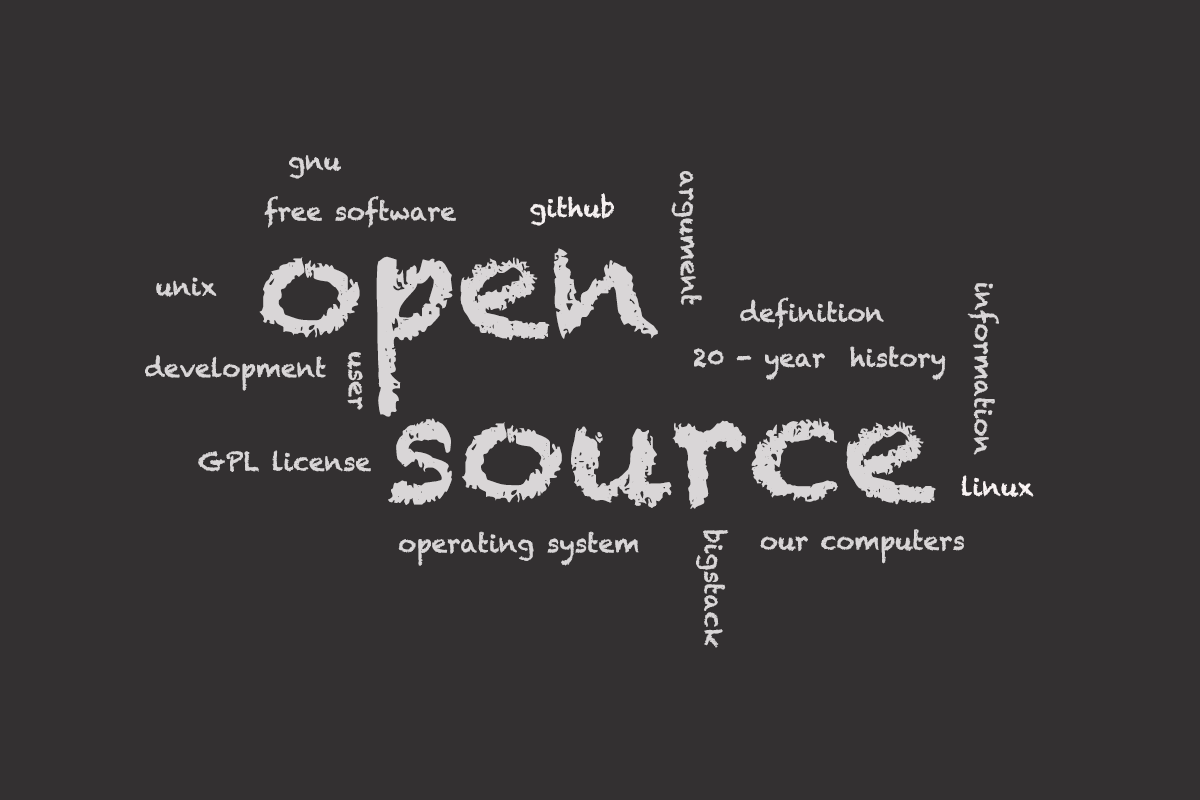
<style>
.page{position:relative;width:1200px;height:800px;background:#333031}
.page>*{position:absolute;margin:0}
.t1{font:25px "Chalkduster";color:#d9d6d7}
.t2{font:25px "Chalkduster";color:#f5f0f0}
.t3{font:150px "Chalkduster";color:#d9d6d7}
.t4{font:150px "Chalkduster";color:#333031}
.t5{font:25px "Chalkduster";color:#f9f3f3}
</style>
<div class="page">
<p class="t1" style="left:289px;top:155px;width:52px;height:24px">gnu</p>
<p class="t1" style="left:671px;top:171px;width:31px;height:134px;rotate:89deg">argument</p>
<p class="t1" style="left:264px;top:196px;width:192px;height:32px">free software</p>
<p class="t2" style="left:530px;top:193px;width:84px;height:33px">github</p>
<p class="t3" style="left:152px;top:248px;width:506px;height:169px"><span class="t4">o</span>open</p>
<p class="t1" style="left:156px;top:277px;width:61px;height:20px">unix</p>
<p class="t1" style="left:967px;top:283px;width:32px;height:172px;rotate:90deg">information</p>
<p class="t1" style="left:740px;top:297px;width:144px;height:32px">definition</p>
<p class="t1" style="left:347px;top:352px;width:16px;height:58px;rotate:89deg">user</p>
<p class="t1" style="left:694px;top:346px;width:252px;height:35px">20 - year  history</p>
<p class="t1" style="left:145px;top:355px;width:181px;height:36px">development</p>
<p class="t3" style="left:388px;top:418px;width:548px;height:91px">sourcee</p>
<p class="t1" style="left:198px;top:450px;width:173px;height:22px">GPL license</p>
<p class="t5" style="left:961px;top:475px;width:73px;height:22px">linux</p>
<p class="t1" style="left:398px;top:531px;width:241px;height:35px">operating system</p>
<p class="t1" style="left:696px;top:530px;width:33px;height:118px;rotate:90deg">bigstack</p>
<p class="t1" style="left:760px;top:529px;width:204px;height:35px">our computers</p>
</div>
